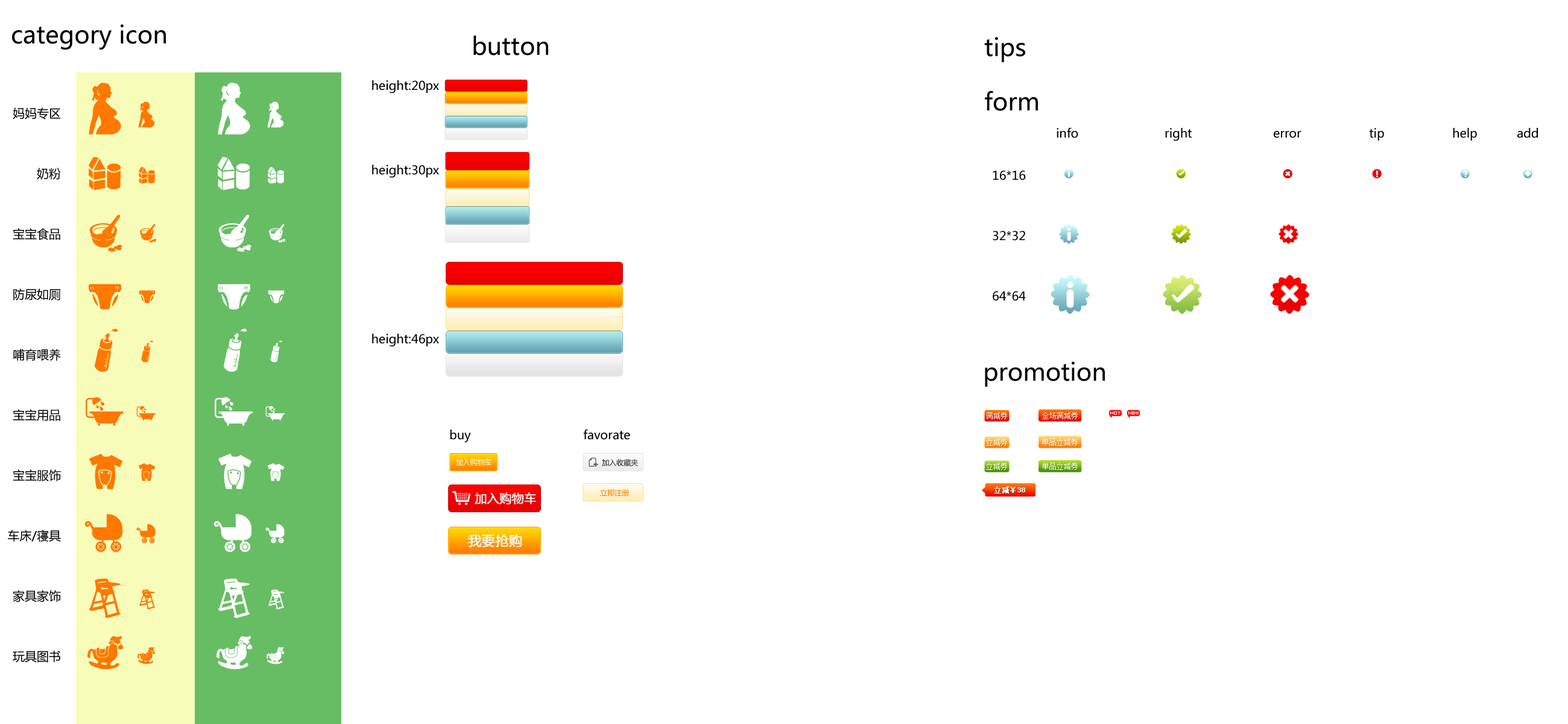
<style>
.page{position:relative;width:1568px;height:724px;background:#ffffff}
.page>*{position:absolute;margin:0}
.t1{font:24.1px "MicrosoftYaHei";color:#000000}
.t2{font:12.1px/84.4px "MicrosoftYaHei";color:#000000}
.t3{font:12.1px/60.3px "MicrosoftYaHei";color:#000000}
.t4{font:12.1px "MicrosoftYaHei";color:#000000}
.t5{font:7.2px "SimSun";color:#ffffff}
.t6{font:3.6px "04b08";color:#ffffff}
.t7{font:7.2px "SimSun";color:#fff6d7}
.t8{font:7.2px "MicrosoftYaHei";color:#202020}
.t9{font:12.1px "MicrosoftYaHei";color:#ffffff;font-weight:bold}
.t10{font:7.2px "MicrosoftYaHei";color:#f78000}
.t11{font:7.2px "SimSun";color:#ffffff;font-weight:bold}
.t12{font:13.3px "MicrosoftYaHei";color:#ffffff;font-weight:bold}
</style>
<div class="page">
<p class="t1" style="left:12px;top:24px;width:154px;height:26px">category icon</p>
<p class="t1" style="left:473px;top:36px;width:75px;height:19px">button</p>
<p class="t1" style="left:984px;top:37px;width:41px;height:25px">tips</p>
<p class="t2" style="left:372px;top:80px;width:67px;height:267px;text-align:right">height:20px<br>height:30px<br><br>height:46px</p>
<p class="t1" style="left:985px;top:90px;width:53px;height:21px">form</p>
<p class="t3" style="left:8px;top:107px;width:53px;height:555px;text-align:right">妈妈专区<br>奶粉<br>宝宝食品<br>防尿如厕<br>哺育喂养<br>宝宝用品<br>宝宝服饰<br>车床/寝具<br>家具家饰<br>玩具图书</p>
<p class="t4" style="left:1057px;top:127px;width:481px;height:14px">info    right    error                   tip                   help           add</p>
<p class="t3" style="left:993px;top:170px;width:33px;height:131px;text-align:right">16*16<br>32*32<br>64*64</p>
<p class="t1" style="left:985px;top:361px;width:120px;height:26px">promotion</p>
<p class="t5" style="left:986px;top:412px;width:21px;height:7px">满减券</p>
<p class="t5" style="left:1042px;top:412px;width:36px;height:7px">全场满减券</p>
<p class="t6" style="left:1110px;top:411px;width:11px;height:3px">HOT</p>
<p class="t6" style="left:1128px;top:411px;width:11px;height:3px">NEW</p>
<p class="t4" style="left:450px;top:429px;width:180px;height:14px">buy       favorate</p>
<p class="t5" style="left:986px;top:438px;width:21px;height:8px">立减券</p>
<p class="t5" style="left:1042px;top:438px;width:36px;height:8px">单品立减券</p>
<p class="t7" style="left:456px;top:458px;width:36px;height:8px">加入购物车</p>
<p class="t8" style="left:602px;top:459px;width:36px;height:7px">加入收藏夹</p>
<p class="t5" style="left:986px;top:463px;width:21px;height:7px">立减券</p>
<p class="t5" style="left:1042px;top:463px;width:36px;height:7px">单品立减券</p>
<p class="t9" style="left:475px;top:492px;width:61px;height:12px">加入购物车</p>
<p class="t10" style="left:600px;top:489px;width:29px;height:7px">立即注册</p>
<p class="t11" style="left:994px;top:486px;width:31px;height:7px">立减￥38</p>
<p class="t12" style="left:468px;top:534px;width:54px;height:14px">我要抢购</p>
</div>
